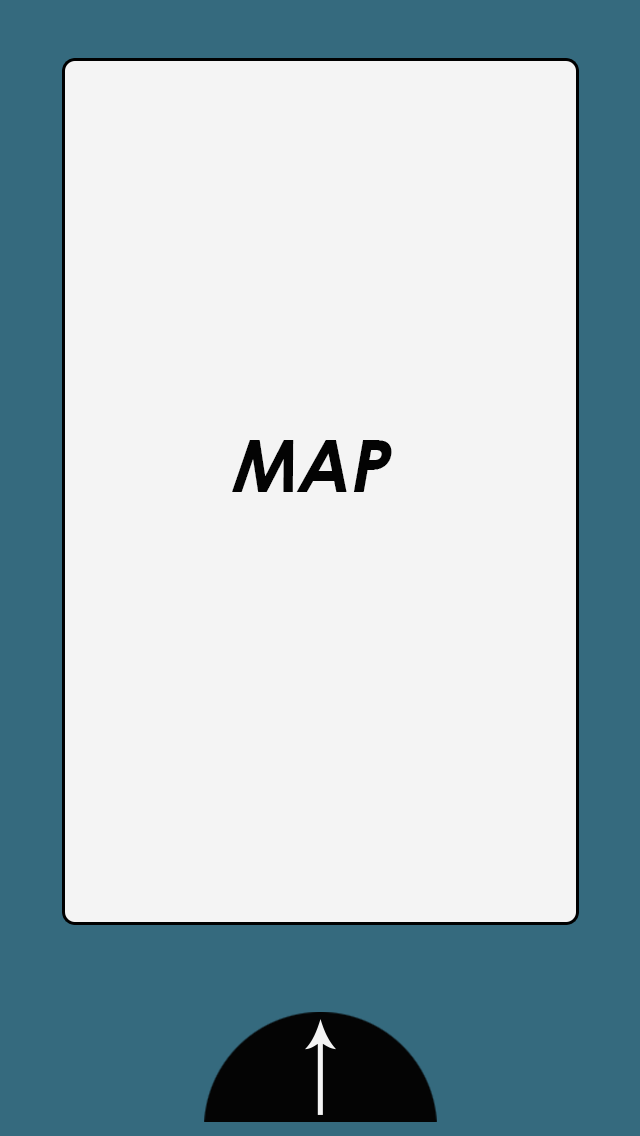
<style>
.page{position:relative;width:640px;height:1136px;background:#f4f4f4}
.page>*{position:absolute;margin:0}
.t1{font:72px "CenturyGothic-Bold";color:#030303;font-style:italic}
</style>
<div class="page">
<p class="t1" style="left:232px;top:440px;width:160px;height:52px">MAP</p>
</div>
